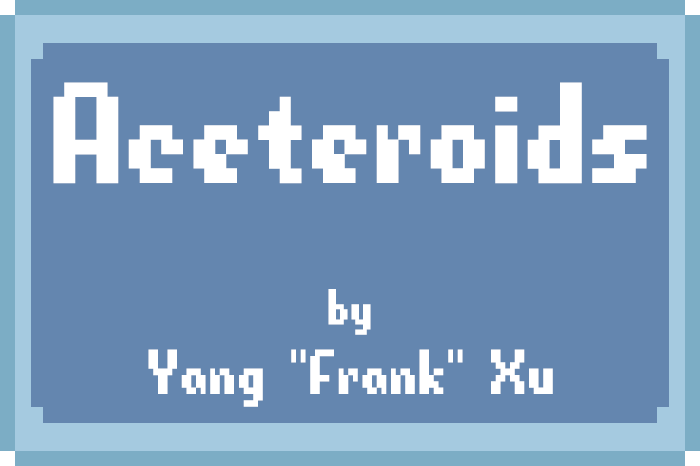
<style>
.page{position:relative;width:700px;height:466px;background:#6486af}
.page>*{position:absolute;margin:0}
.t1{font:229.6px "198O";color:#ffffff}
.t2{font:81px "198O";color:#ffffff}
.t3{font:101.3px "198O";color:#ffffff}
</style>
<div class="page">
<p class="t1" style="left:53px;top:82px;width:594px;height:102px">Aceteroids</p>
<p class="t2" style="left:328px;top:289px;width:43px;height:46px">by</p>
<p class="t3" style="left:148px;top:349px;width:405px;height:58px">Yang "Frank" Xu</p>
</div>
